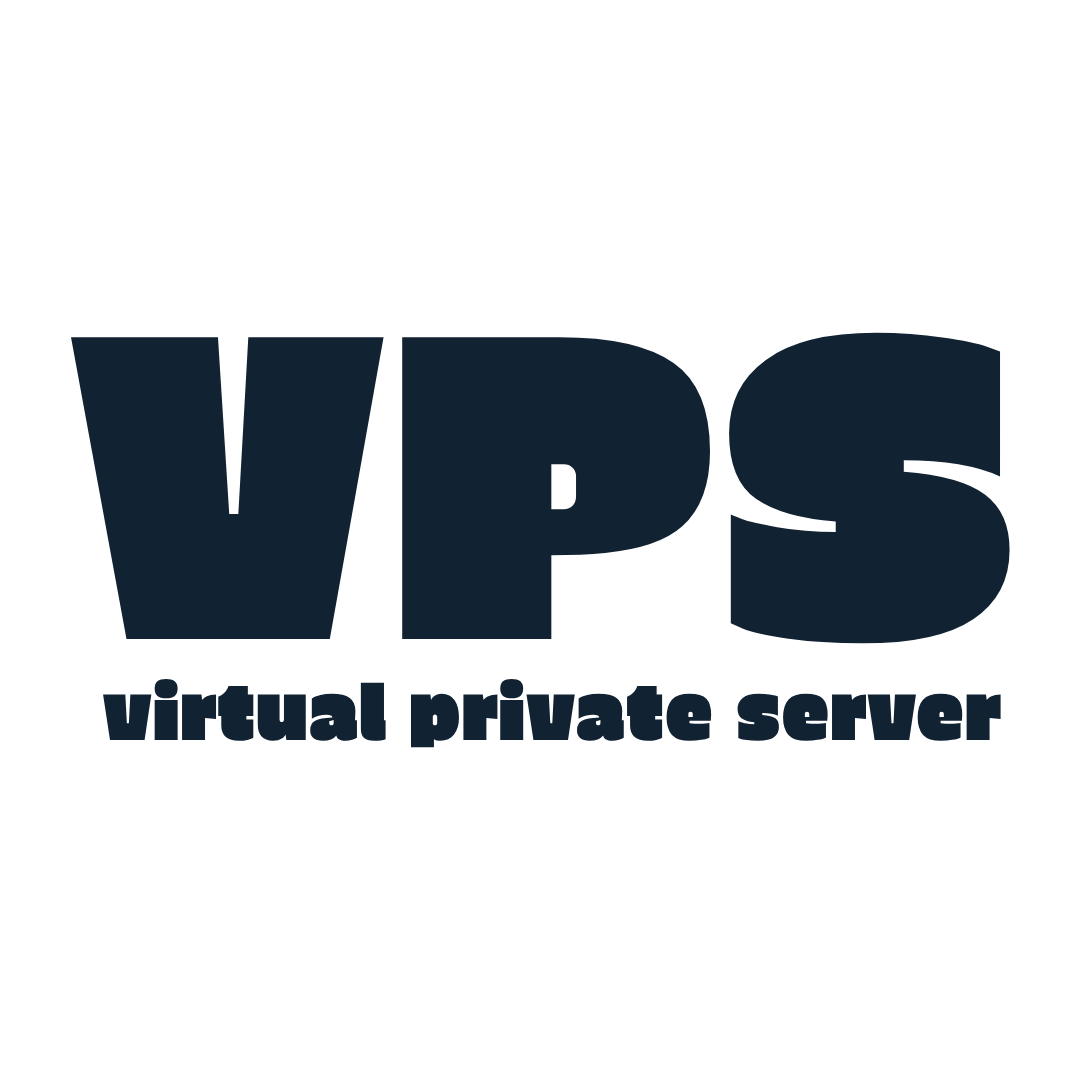
<style>
.page{position:relative;width:1080px;height:1080px;background:#ffffff}
.page>*{position:absolute;margin:0}
.t1{font:436.8px "EricaOne-Regular";color:#112233}
.t2{font:77px "EricaOne-Regular";color:#112233}
</style>
<div class="page">
<p class="t1" style="left:71px;top:332px;width:939px;height:312px">VPS</p>
<p class="t2" style="left:103px;top:679px;width:898px;height:69px">virtual private server</p>
</div>
